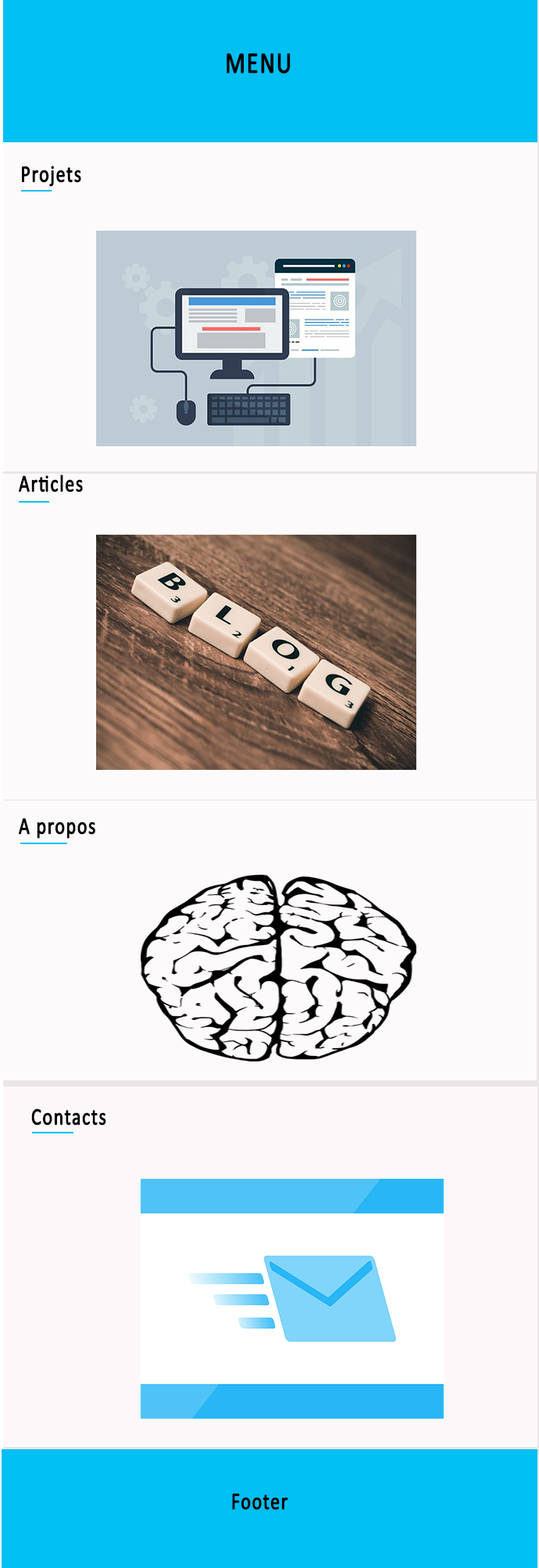
<style>
.page{position:relative;width:539px;height:1568px;background:#fdfafb}
.page>*{position:absolute;margin:0}
.t1{font:29.8px "Calibri";letter-spacing:0.04em;color:#000000;font-weight:bold;scale:0.79 1}
.t2{font:23.8px "Calibri";letter-spacing:0.04em;color:#000000;font-weight:bold;scale:0.79 1}
.t3{font:23.8px "Calibri";letter-spacing:0.04em;color:#030303;font-weight:bold;scale:0.79 1}
</style>
<div class="page">
<p class="t1" style="left:227px;top:53px;width:64px;height:20px">MENU</p>
<p class="t2" style="left:22px;top:166px;width:59px;height:21px">Projets</p>
<p class="t3" style="left:19px;top:474px;width:64px;height:18px">Articles</p>
<p class="t3" style="left:19px;top:818px;width:76px;height:21px">A propos</p>
<p class="t3" style="left:31px;top:1108px;width:75px;height:18px">Contacts</p>
<p class="t3" style="left:232px;top:1493px;width:56px;height:17px">Footer</p>
</div>
